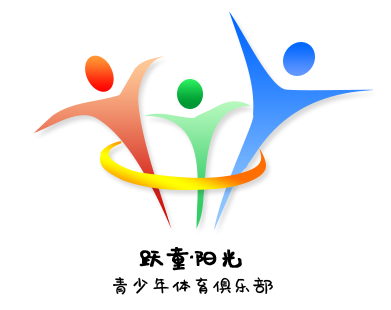
<style>
.page{position:relative;width:391px;height:310px;background:#ffffff}
.page>*{position:absolute;margin:0}
.t1{font:24px/25px "yumuyuanyuanti";letter-spacing:-0.15em;color:#000000}
.t2{font:30px/25px "yumuyuanyuanti";letter-spacing:-0.15em;color:#000000;font-weight:bold}
</style>
<div class="page">
<p class="t1" style="left:113px;top:247px;width:160px;height:48px;text-align:center"><span class="t2">跃童·阳光<br></span>青少年体育俱乐部</p>
</div>
